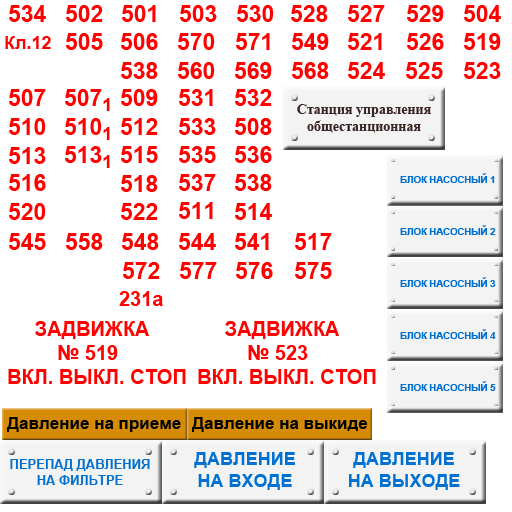
<style>
.page{position:relative;width:512px;height:512px;background:#ffffff}
.page>*{position:absolute;margin:0}
.t1{font:23px "Arial-BoldMT";color:#ff0101}
.t2{font:18px "Arial-BoldMT";color:#ff0101}
.t3{font:14px "TimesNewRomanPS-BoldMT";color:#3a2525}
.t4{font:9.5px "Arial-BoldMT";color:#0171d1}
.t5{font:20px "Arial-BoldMT";color:#ff0101}
.t6{font:17px "Arial-BoldMT";color:#000000}
.t7{font:13px "Arial-BoldMT";color:#0171d1}
.t8{font:18px "Arial-BoldMT";color:#0171d1}
</style>
<div class="page">
<p class="t1" style="left:9px;top:5px;width:37px;height:17px">534</p>
<p class="t1" style="left:66px;top:5px;width:37px;height:17px">502</p>
<p class="t1" style="left:122px;top:5px;width:34px;height:17px">501</p>
<p class="t1" style="left:180px;top:5px;width:37px;height:17px">503</p>
<p class="t1" style="left:237px;top:5px;width:37px;height:17px">530</p>
<p class="t1" style="left:291px;top:5px;width:37px;height:17px">528</p>
<p class="t1" style="left:348px;top:5px;width:37px;height:17px">527</p>
<p class="t1" style="left:407px;top:5px;width:37px;height:17px">529</p>
<p class="t1" style="left:464px;top:5px;width:37px;height:17px">504</p>
<p class="t2" style="left:5px;top:36px;width:46px;height:13px">Кл.12</p>
<p class="t1" style="left:66px;top:33px;width:37px;height:17px">505</p>
<p class="t1" style="left:121px;top:33px;width:37px;height:17px">506</p>
<p class="t1" style="left:178px;top:33px;width:37px;height:17px">570</p>
<p class="t1" style="left:236px;top:33px;width:34px;height:17px">571</p>
<p class="t1" style="left:292px;top:33px;width:37px;height:17px">549</p>
<p class="t1" style="left:348px;top:33px;width:34px;height:17px">521</p>
<p class="t1" style="left:407px;top:33px;width:37px;height:17px">526</p>
<p class="t1" style="left:464px;top:33px;width:37px;height:17px">519</p>
<p class="t1" style="left:121px;top:62px;width:37px;height:17px">538</p>
<p class="t1" style="left:178px;top:62px;width:37px;height:17px">560</p>
<p class="t1" style="left:235px;top:62px;width:37px;height:17px">569</p>
<p class="t1" style="left:292px;top:62px;width:37px;height:17px">568</p>
<p class="t1" style="left:348px;top:62px;width:37px;height:17px">524</p>
<p class="t1" style="left:406px;top:62px;width:37px;height:17px">525</p>
<p class="t1" style="left:464px;top:62px;width:37px;height:17px">523</p>
<p class="t1" style="left:9px;top:89px;width:37px;height:17px">507</p>
<p class="t1" style="left:65px;top:89px;width:45px;height:22px">507<span class="t2">1</span></p>
<p class="t1" style="left:121px;top:89px;width:37px;height:17px">509</p>
<p class="t1" style="left:179px;top:89px;width:34px;height:17px">531</p>
<p class="t1" style="left:235px;top:89px;width:37px;height:17px">532</p>
<p class="t3" style="left:297px;top:104px;width:134px;height:29px;text-align:center">Станция управления<br>общестанционная</p>
<p class="t1" style="left:9px;top:118px;width:37px;height:17px">510</p>
<p class="t1" style="left:65px;top:118px;width:45px;height:22px">510<span class="t2">1</span></p>
<p class="t1" style="left:121px;top:118px;width:37px;height:17px">512</p>
<p class="t1" style="left:179px;top:118px;width:37px;height:17px">533</p>
<p class="t1" style="left:235px;top:118px;width:37px;height:17px">508</p>
<p class="t1" style="left:9px;top:147px;width:37px;height:17px">513</p>
<p class="t1" style="left:65px;top:146px;width:45px;height:22px">513<span class="t2">1</span></p>
<p class="t1" style="left:121px;top:146px;width:37px;height:17px">515</p>
<p class="t1" style="left:179px;top:146px;width:37px;height:17px">535</p>
<p class="t1" style="left:235px;top:146px;width:37px;height:17px">536</p>
<p class="t1" style="left:9px;top:174px;width:37px;height:17px">516</p>
<p class="t1" style="left:179px;top:174px;width:37px;height:17px">537</p>
<p class="t1" style="left:235px;top:174px;width:37px;height:17px">538</p>
<p class="t4" style="left:400px;top:173px;width:95px;height:10px">БЛОК НАСОСНЫЙ 1</p>
<p class="t1" style="left:121px;top:175px;width:37px;height:17px">518</p>
<p class="t1" style="left:9px;top:203px;width:37px;height:17px">520</p>
<p class="t1" style="left:121px;top:203px;width:37px;height:17px">522</p>
<p class="t1" style="left:179px;top:202px;width:34px;height:17px">511</p>
<p class="t1" style="left:235px;top:203px;width:37px;height:17px">514</p>
<p class="t1" style="left:9px;top:233px;width:37px;height:17px">545</p>
<p class="t1" style="left:66px;top:233px;width:37px;height:17px">558</p>
<p class="t1" style="left:122px;top:233px;width:37px;height:17px">548</p>
<p class="t1" style="left:179px;top:233px;width:37px;height:17px">544</p>
<p class="t1" style="left:235px;top:233px;width:34px;height:17px">541</p>
<p class="t1" style="left:295px;top:233px;width:37px;height:17px">517</p>
<p class="t4" style="left:400px;top:225px;width:96px;height:10px">БЛОК НАСОСНЫЙ 2</p>
<p class="t1" style="left:123px;top:262px;width:37px;height:17px">572</p>
<p class="t1" style="left:180px;top:262px;width:37px;height:17px">577</p>
<p class="t1" style="left:236px;top:262px;width:37px;height:17px">576</p>
<p class="t1" style="left:295px;top:262px;width:37px;height:17px">575</p>
<p class="t4" style="left:400px;top:277px;width:96px;height:10px">БЛОК НАСОСНЫЙ 3</p>
<p class="t5" style="left:119px;top:291px;width:44px;height:15px">231a</p>
<p class="t5" style="left:8px;top:321px;width:178px;height:63px">ЗАДВИЖКА<br>         № 519<br>ВКЛ. ВЫКЛ. СТОП</p>
<p class="t5" style="left:198px;top:321px;width:178px;height:63px">ЗАДВИЖКА<br>         № 523<br>ВКЛ. ВЫКЛ. СТОП</p>
<p class="t4" style="left:400px;top:329px;width:96px;height:10px">БЛОК НАСОСНЫЙ 4</p>
<p class="t4" style="left:400px;top:381px;width:96px;height:10px">БЛОК НАСОСНЫЙ 5</p>
<p class="t6" style="left:7px;top:417px;width:174px;height:15px">Давление на приеме</p>
<p class="t6" style="left:192px;top:417px;width:176px;height:15px">Давление на выкиде</p>
<p class="t7" style="left:10px;top:459px;width:140px;height:26px;text-align:center">ПЕРЕПАД ДАВЛЕНИЯ<br>НА ФИЛЬТРЕ</p>
<p class="t8" style="left:194px;top:452px;width:101px;height:38px;text-align:center">ДАВЛЕНИЕ<br>НА ВХОДЕ</p>
<p class="t8" style="left:349px;top:452px;width:111px;height:38px;text-align:center">ДАВЛЕНИЕ<br>НА ВЫХОДЕ</p>
</div>
